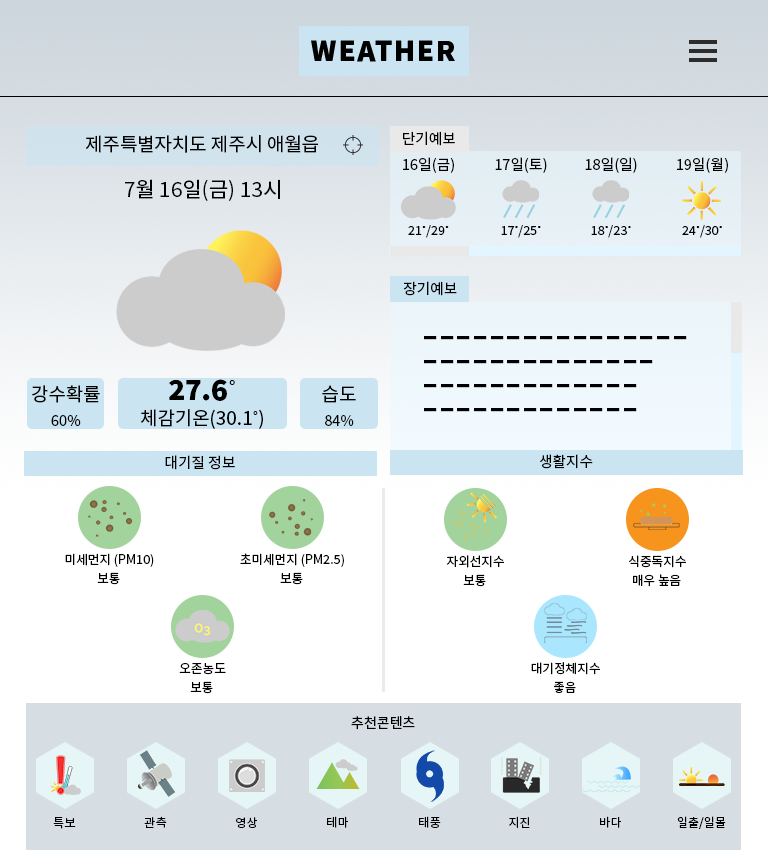
<style>
.page{position:relative;width:768px;height:850px;background:#ffffff}
.page>*{position:absolute;margin:0}
.t1{font:18.8px "NotoSansKR-Regular";color:#000000}
.t2{font:14.7px "NotoSansKR-Regular";color:#000000}
.t3{font:20.9px "NotoSansKR-Regular";color:#000000}
.t4{font:12.6px "NotoSansKR-Regular";color:#000000}
.t5{font:12.6px "Gulim";color:#000000}
.t6{font:48px/24px "NotoSansKR-Regular";color:#000000}
.t7{font:18.8px/25.1px "NotoSansKR-Regular";color:#000000}
.t8{font:14.7px/25.1px "NotoSansKR-Regular";color:#000000}
.t9{font:27.2px/25.1px "NotoSansKR-Black";color:#000000}
.t10{font:27.2px/25.1px "Gulim";color:#000000}
.t11{font:18.8px/25.1px "Gulim";color:#000000}
.t12{font:14px "NotoSansKR-Regular";color:#000000}
.t13{font:12px "NotoSansKR-Regular";color:#000000}
</style>
<div class="page">
<p class="t1" style="left:85px;top:135px;width:233px;height:18px">제주특별자치도 제주시 애월읍</p>
<p class="t2" style="left:403px;top:131px;width:52px;height:15px">단기예보</p>
<p class="t2" style="left:403px;top:157px;width:51px;height:16px">16일(금)</p>
<p class="t2" style="left:495px;top:157px;width:52px;height:16px">17일(토)</p>
<p class="t2" style="left:585px;top:157px;width:52px;height:16px">18일(일)</p>
<p class="t2" style="left:677px;top:157px;width:51px;height:16px">19일(월)</p>
<p class="t3" style="left:125px;top:179px;width:155px;height:22px">7월 16일(금) 13시</p>
<p class="t4" style="left:408px;top:225px;width:41px;height:13px">21<span class="t5">˚</span>/29<span class="t5">˚</span></p>
<p class="t4" style="left:501px;top:225px;width:40px;height:13px">17<span class="t5">˚</span>/25<span class="t5">˚</span></p>
<p class="t4" style="left:591px;top:225px;width:40px;height:13px">18<span class="t5">˚</span>/23<span class="t5">˚</span></p>
<p class="t4" style="left:682px;top:225px;width:40px;height:13px">24<span class="t5">˚</span>/30<span class="t5">˚</span></p>
<p class="t2" style="left:403px;top:281px;width:54px;height:15px">장기예보</p>
<p class="t6" style="left:424px;top:336px;width:263px;height:76px;text-align:center">----------------<br>--------------<br>-------------<br>-------------</p>
<p class="t7" style="left:32px;top:385px;width:68px;height:41px;text-align:center">강수확률<br><span class="t8">60%</span></p>
<p class="t7" style="left:140px;top:379px;width:123px;height:50px;text-align:center"><span class="t9">27.6</span><span class="t10">˚<br></span>체감기온(30.1<span class="t11">˚</span>)</p>
<p class="t8" style="left:322px;top:385px;width:34px;height:41px;text-align:center"><span class="t7">습도<br></span>84%</p>
<p class="t2" style="left:165px;top:455px;width:70px;height:15px">대기질 정보</p>
<p class="t2" style="left:540px;top:454px;width:53px;height:15px">생활지수</p>
<p class="t4" style="left:65px;top:553px;width:89px;height:14px">미세먼지 (PM10)</p>
<p class="t4" style="left:240px;top:553px;width:104px;height:14px">초미세먼지 (PM2.5)</p>
<p class="t4" style="left:446px;top:555px;width:58px;height:13px">자외선지수</p>
<p class="t4" style="left:629px;top:555px;width:57px;height:13px">식중독지수</p>
<p class="t4" style="left:97px;top:572px;width:23px;height:13px">보통</p>
<p class="t4" style="left:280px;top:572px;width:23px;height:13px">보통</p>
<p class="t4" style="left:463px;top:574px;width:23px;height:13px">보통</p>
<p class="t4" style="left:633px;top:574px;width:48px;height:13px">매우 높음</p>
<p class="t4" style="left:179px;top:663px;width:47px;height:12px">오존농도</p>
<p class="t4" style="left:531px;top:662px;width:69px;height:13px">대기정체지수</p>
<p class="t4" style="left:190px;top:681px;width:23px;height:13px">보통</p>
<p class="t4" style="left:554px;top:681px;width:22px;height:12px">좋음</p>
<p class="t12" style="left:351px;top:716px;width:64px;height:14px">추천콘텐츠</p>
<p class="t13" style="left:53px;top:817px;width:23px;height:12px">특보</p>
<p class="t13" style="left:144px;top:816px;width:23px;height:12px">관측</p>
<p class="t13" style="left:236px;top:817px;width:21px;height:11px">영상</p>
<p class="t13" style="left:327px;top:816px;width:21px;height:12px">테마</p>
<p class="t13" style="left:419px;top:816px;width:22px;height:12px">태풍</p>
<p class="t13" style="left:509px;top:816px;width:21px;height:12px">지진</p>
<p class="t13" style="left:600px;top:816px;width:21px;height:12px">바다</p>
<p class="t13" style="left:677px;top:816px;width:49px;height:13px">일출/일몰</p>
</div>
